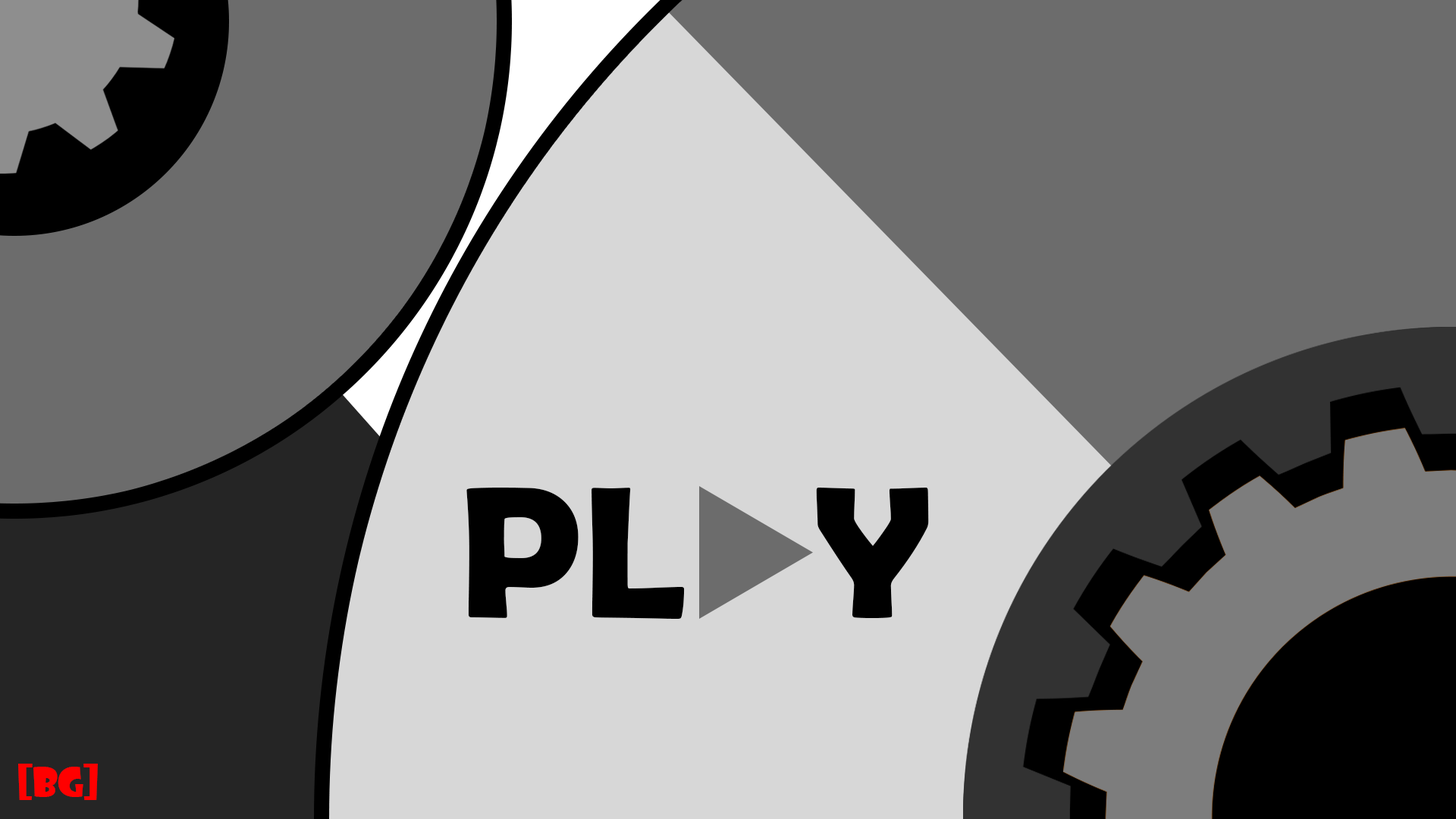
<style>
.page{position:relative;width:1456px;height:819px;background:#6c6c6c}
.page>*{position:absolute;margin:0}
.t1{font:189.8px "BerlinSansFBDemi-Bold";color:#000000}
.t2{font:37.9px "ShowcardGothic-Reg";color:#ff0000}
</style>
<div class="page">
<p class="t1" style="left:466px;top:487px;width:463px;height:132px">PL     Y</p>
<p class="t2" style="left:18px;top:764px;width:80px;height:36px">[bg]</p>
</div>
